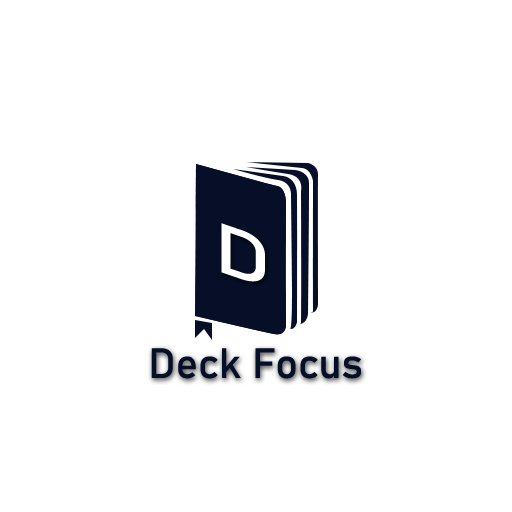
<style>
.page{position:relative;width:512px;height:512px;background:#ffffff}
.page>*{position:absolute;margin:0}
.t1{font:68.8px "Bahnschrift";color:#ffffff;scale:1.34 1}
.t2{font:41.7px "Bahnschrift";color:#061028}
</style>
<div class="page">
<p class="t1" style="left:221px;top:223px;width:44px;height:59px;rotate:19deg">D</p>
<p class="t2" style="left:151px;top:348px;width:210px;height:31px">Deck Focus</p>
</div>
